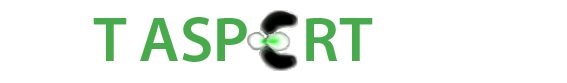
<style>
.page{position:relative;width:567px;height:83px;background:#ffffff}
.page>*{position:absolute;margin:0}
.t1{font:64px "MyriadPro-Semibold";color:#47ab4c}
</style>
<div class="page">
<p class="t1" style="left:93px;top:17px;width:280px;height:45px">T ASP    RT</p>
</div>
